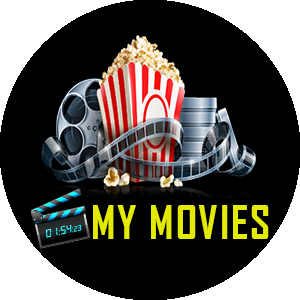
<style>
.page{position:relative;width:300px;height:300px;background:#000000}
.page>*{position:absolute;margin:0}
.t1{font:44.2px "AgencyFB-Bold";letter-spacing:0.04em;color:#e3eb03}
</style>
<div class="page">
<p class="t1" style="left:93px;top:205px;width:176px;height:34px">MY MOVIES</p>
</div>
